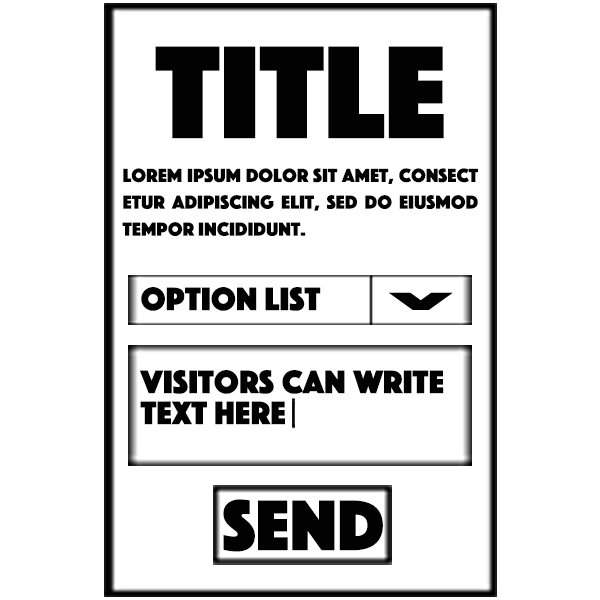
<style>
.page{position:relative;width:600px;height:600px;background:#ffffff}
.page>*{position:absolute;margin:0}
.t1{font:137.3px "Phosphate-Solid";color:#020202}
.t2{font:20px/26.9px "Phosphate-Solid";color:#020202}
.t3{font:34px "Phosphate-Solid";color:#020202}
.t4{font:74.5px "Phosphate-Solid";color:#020202}
</style>
<div class="page">
<p class="t1" style="left:155px;top:46px;width:289px;height:93px">TITLE</p>
<p class="t2" style="left:122px;top:168px;width:356px;height:68px;text-align:justify">Lorem ipsum dolor sit amet, consect etur adipiscing elit, sed do eiusmod tempor incididunt.</p>
<p class="t3" style="left:141px;top:287px;width:180px;height:24px">option list</p>
<p class="t3" style="left:139px;top:370px;width:305px;height:55px">visitors can write text here</p>
<p class="t4" style="left:223px;top:499px;width:160px;height:53px">SEND</p>
</div>
